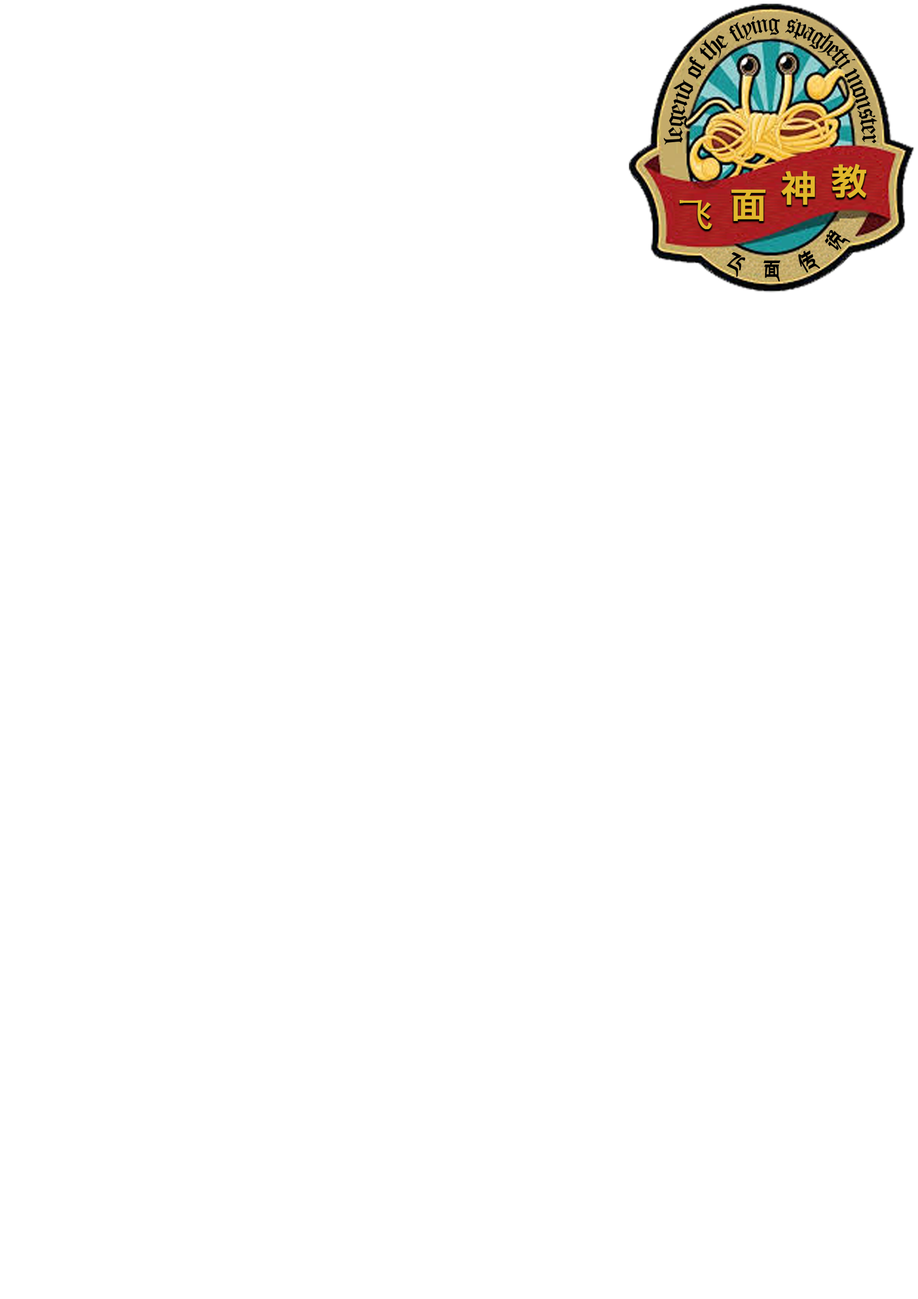
<style>
.page{position:relative;width:918px;height:1299px;background:#ffffff}
.page>*{position:absolute;margin:0}
.t1{font:24.9px "OldEnglishTextMT";letter-spacing:-0.05em;color:#000000;scale:0.8 1}
.t2{font:26.8px "OldEnglishTextMT";letter-spacing:-0.05em;color:#000000;scale:0.75 1}
.t3{font:26.8px "OldEnglishTextMT";letter-spacing:-0.05em;color:#000000;scale:0.9 1}
.t4{font:35.9px "LiGothicMed";color:#e1b82c;font-weight:bold}
.t5{font:35.9px "STHeitiSC-Light";color:#e1b82c;font-weight:bold}
.t6{font:23px "-";color:#000000;font-weight:bold}
</style>
<div class="page">
<p class="t1" style="left:729px;top:16px;width:51px;height:25px;rotate:-15deg">flying</p>
<p class="t2" style="left:785px;top:19px;width:71px;height:51px;rotate:35deg">spaghetti</p>
<p class="t3" style="left:700px;top:35px;width:28px;height:26px;rotate:-41deg">the</p>
<p class="t3" style="left:688px;top:56px;width:17px;height:23px;rotate:-60deg">of</p>
<p class="t3" style="left:844px;top:68px;width:33px;height:76px;rotate:75deg">monster</p>
<p class="t3" style="left:663px;top:79px;width:30px;height:66px;rotate:-78deg">legend</p>
<p class="t4" style="left:781px;top:171px;width:34px;height:34px">神</p>
<p class="t4" style="left:832px;top:164px;width:34px;height:34px">教</p>
<p class="t4" style="left:732px;top:190px;width:34px;height:31px">面</p>
<p class="t5" style="left:680px;top:200px;width:32px;height:29px">飞</p>
<p class="t6" style="left:825px;top:230px;width:25px;height:20px;rotate:-52deg">说</p>
<p class="t6" style="left:726px;top:252px;width:19px;height:25px;rotate:27deg">飞</p>
<p class="t6" style="left:798px;top:251px;width:22px;height:22px;rotate:-30deg">传</p>
<p class="t6" style="left:763px;top:260px;width:17px;height:21px">面</p>
</div>
